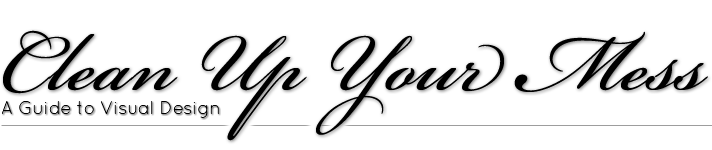
<style>
.page{position:relative;width:712px;height:150px;background:#ffffff}
.page>*{position:absolute;margin:0}
.t1{font:125px "BickhamScriptPro-Regular";color:#000000}
.t2{font:18px "QuicksandLight-Regular";color:#000000}
</style>
<div class="page">
<p class="t1" style="left:3px;top:30px;width:705px;height:111px">Clean Up Your Mess</p>
<p class="t2" style="left:2px;top:101px;width:217px;height:17px">A Guide to Visual Design</p>
</div>
